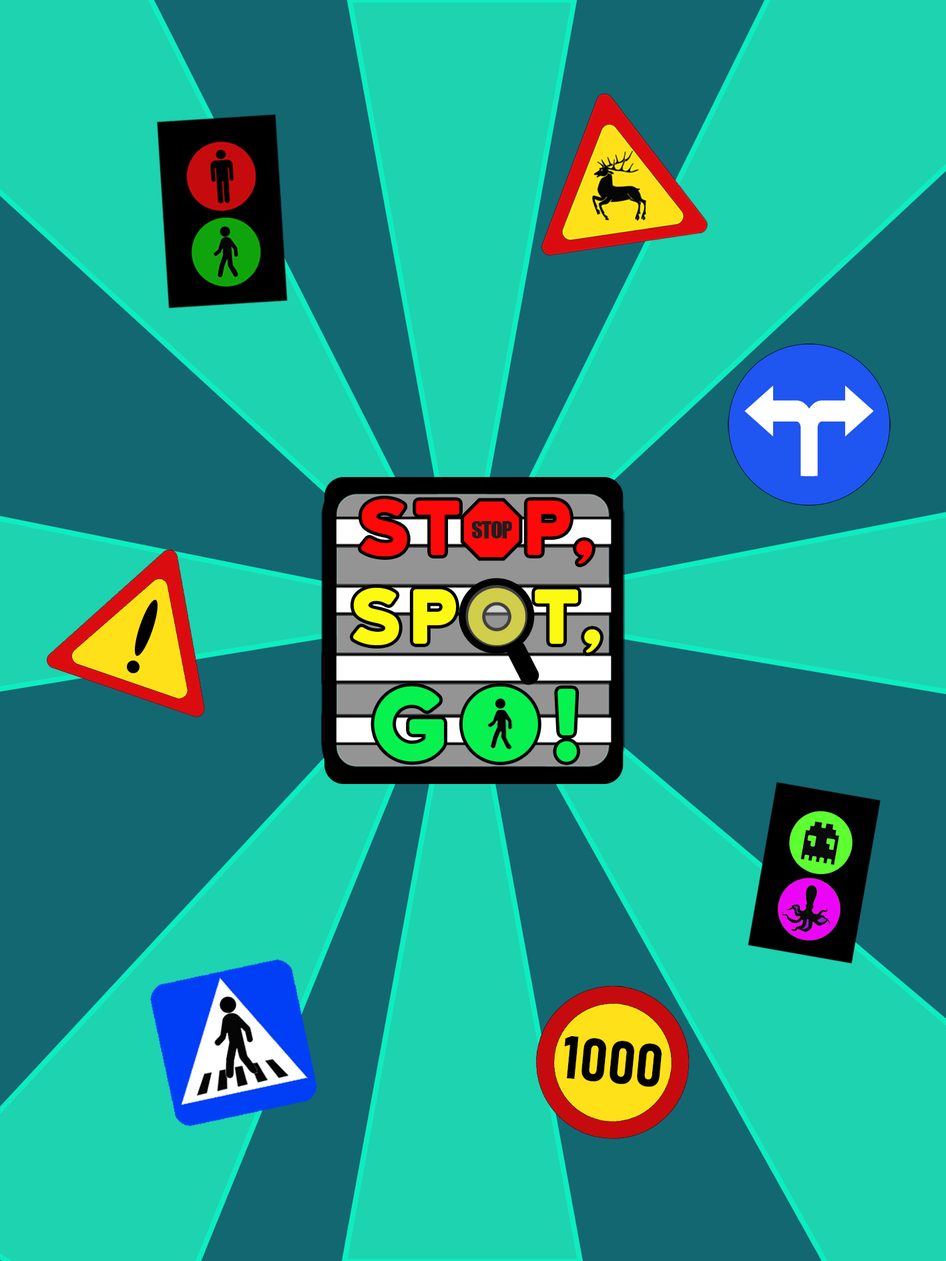
<style>
.page{position:relative;width:946px;height:1261px;background:#1dd3b0}
.page>*{position:absolute;margin:0}
.t1{font:73.5px "KatahdinRound-Regular";letter-spacing:0.07em;color:#fe0909}
.t2{font:73.5px "KatahdinRound-Regular";letter-spacing:0.07em;color:#fdfa12}
.t3{font:96.7px "KatahdinRound-Regular";letter-spacing:0.07em;color:#08f24f}
.t4{font:22.3px "Impact";letter-spacing:-0.055em;color:#211c1c}
.t5{font:59.7px "Bahnschrift-BoldSemiCondensed";color:#000000}
</style>
<div class="page">
<p class="t1" style="left:353px;top:499px;width:247px;height:263px;text-align:center">St  p,<br><span class="t2">SPot,<br></span><span class="t3">Go!</span></p>
<p class="t4" style="left:471px;top:521px;width:41px;height:17px">STOP</p>
<p class="t5" style="left:564px;top:1036px;width:97px;height:51px;rotate:6deg">1000</p>
</div>
